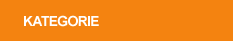
<style>
.page{position:relative;width:233px;height:41px;background:#f48310}
.page>*{position:absolute;margin:0}
.t1{font:14px "Arial-BoldMT";letter-spacing:-0.05em;color:#ffffff;text-transform:uppercase}
</style>
<div class="page">
<p class="t1" style="left:24px;top:15px;width:75px;height:12px">kategorie</p>
</div>
